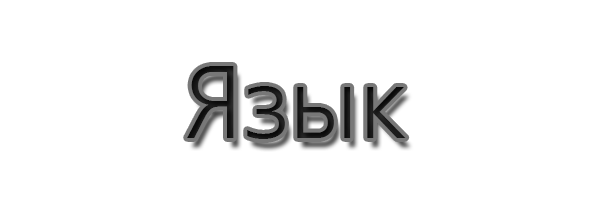
<style>
.page{position:relative;width:600px;height:200px;background:#ffffff}
.page>*{position:absolute;margin:0}
.t1{font:100px "MalgunGothic-Semilight";color:#151515}
</style>
<div class="page">
<p class="t1" style="left:187px;top:66px;width:219px;height:73px">Язык</p>
</div>
